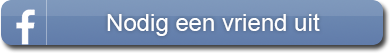
<style>
.page{position:relative;width:390px;height:53px}
.page>*{position:absolute;margin:0}
.t1{font:24px "ArialMT";color:#ffffff}
</style>
<div class="page">
<p class="t1" style="left:107px;top:13px;width:213px;height:23px">Nodig een vriend uit</p>
</div>
